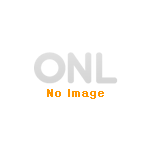
<style>
.page{position:relative;width:150px;height:150px;background:#ffffff}
.page>*{position:absolute;margin:0}
.t1{font:11px "Dotum";color:#ff9600;font-weight:bold}
</style>
<div class="page">
<p class="t1" style="left:47px;top:89px;width:57px;height:10px">No Image</p>
</div>
